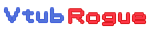
<style>
.page{position:relative;width:150px;height:33px;background:#ffffff}
.page>*{position:absolute;margin:0}
.t1{font:15.6px "Pokemon-Classic";color:#5273d9}
.t2{font:15.6px "Pokemon-Classic";color:#fe3546}
</style>
<div class="page">
<p class="t1" style="left:4px;top:8px;width:60px;height:15px">Vtub</p>
<p class="t2" style="left:69px;top:9px;width:77px;height:17px">Rogue</p>
</div>
